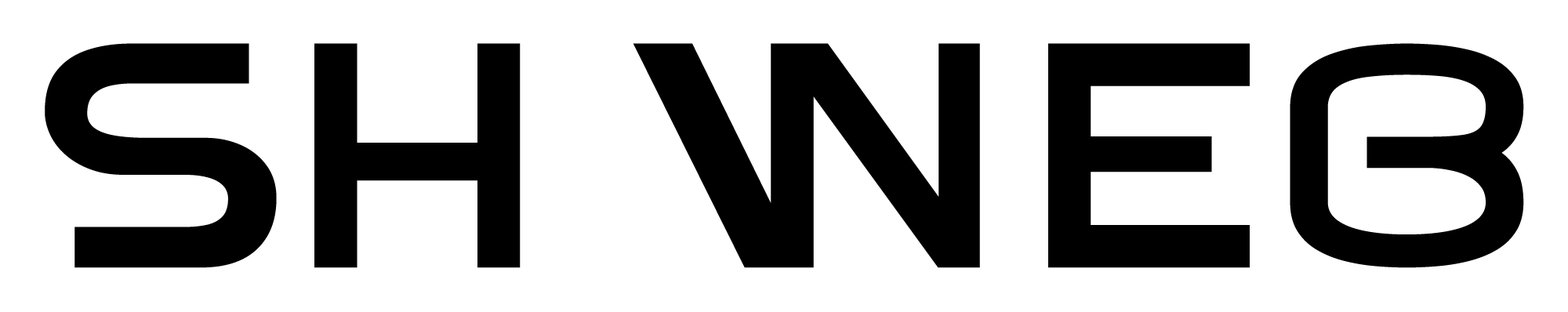
<style>
.page{position:relative;width:1568px;height:312px;background:#ffffff}
.page>*{position:absolute;margin:0}
.t1{font:319.2px "RintBasic";color:#000000}
</style>
<div class="page">
<p class="t1" style="left:45px;top:43px;width:1479px;height:225px">SH web</p>
</div>
